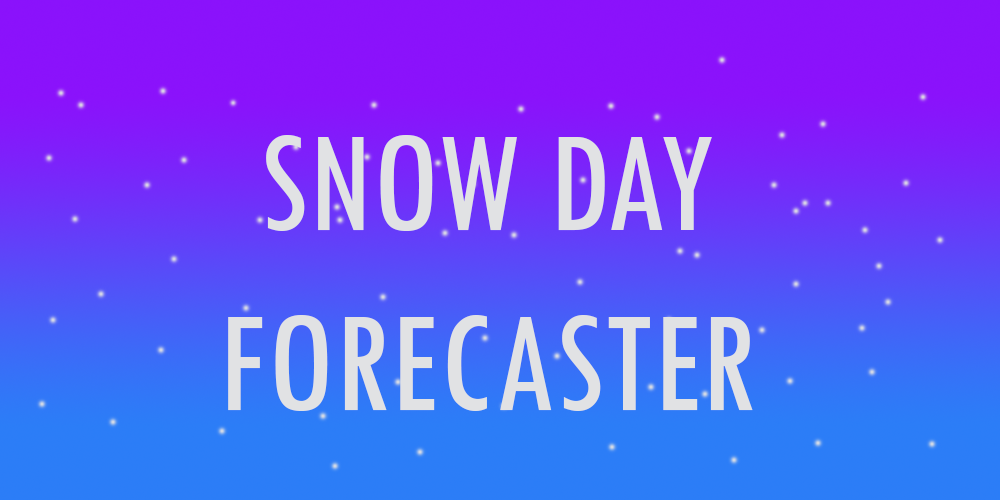
<style>
.page{position:relative;width:1000px;height:500px}
.page>*{position:absolute;margin:0}
.t1{font:150px "TwCenMT-Condensed";color:#e1e2e4}
</style>
<div class="page">
<p class="t1" style="left:228px;top:135px;width:525px;height:276px;text-align:center">SNOW DAY<br>FORECASTER</p>
</div>
